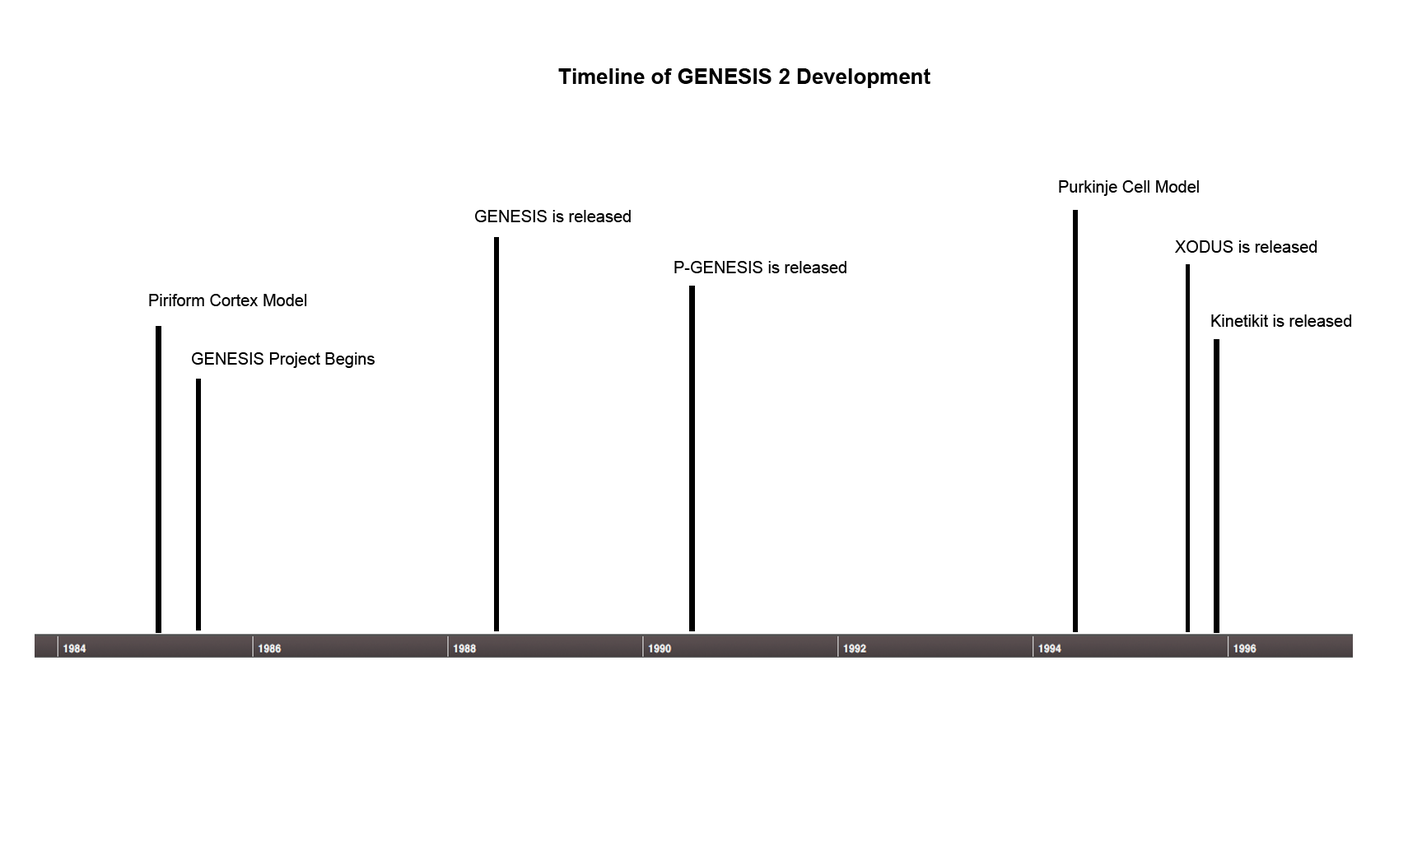
<style>
.page{position:relative;width:1408px;height:847px;background:#ffffff}
.page>*{position:absolute;margin:0}
.t1{font:21.4px "Arial-BoldMT";color:#000000}
.t2{font:16.5px "ArialMT";color:#000000}
</style>
<div class="page">
<p class="t1" style="left:558px;top:68px;width:372px;height:20px">Timeline of GENESIS 2 Development</p>
<p class="t2" style="left:1059px;top:180px;width:140px;height:16px">Purkinje Cell Model</p>
<p class="t2" style="left:475px;top:210px;width:156px;height:12px">GENESIS is released</p>
<p class="t2" style="left:1175px;top:240px;width:142px;height:13px">XODUS is released</p>
<p class="t2" style="left:674px;top:261px;width:172px;height:12px">P-GENESIS is released</p>
<p class="t2" style="left:149px;top:294px;width:158px;height:12px">Piriform Cortex Model</p>
<p class="t2" style="left:1211px;top:314px;width:141px;height:13px">Kinetikit is released</p>
<p class="t2" style="left:192px;top:352px;width:183px;height:16px">GENESIS Project Begins</p>
</div>
